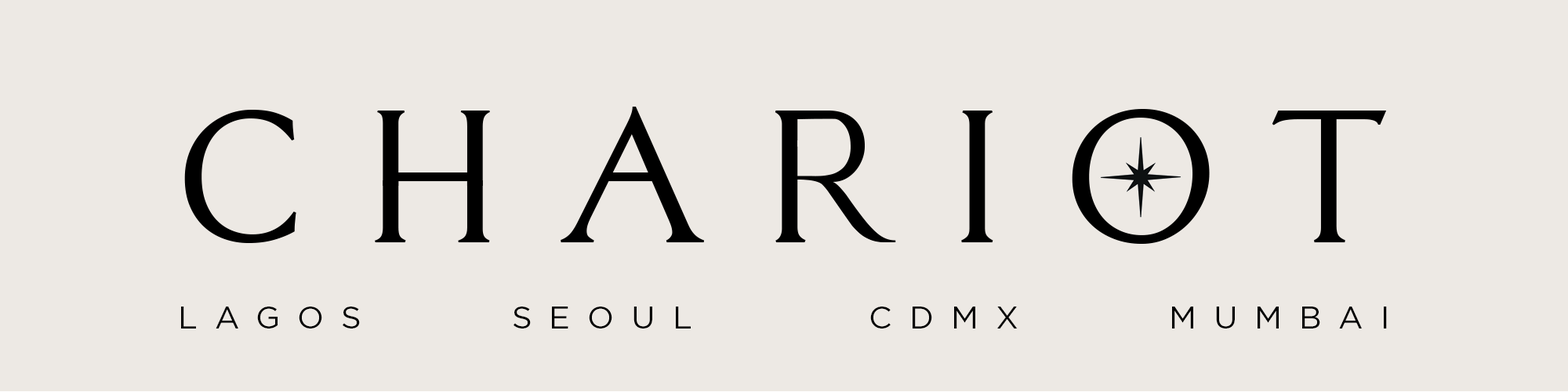
<style>
.page{position:relative;width:1568px;height:392px;background:#ede9e4}
.page>*{position:absolute;margin:0}
.t1{font:31.4px "Gotham-Book";letter-spacing:0.55em;color:#000000}
</style>
<div class="page">
<p class="t1" style="left:181px;top:307px;width:1206px;height:21px">LAGOS     SEOUL      CDMX     MUMBAI</p>
</div>
